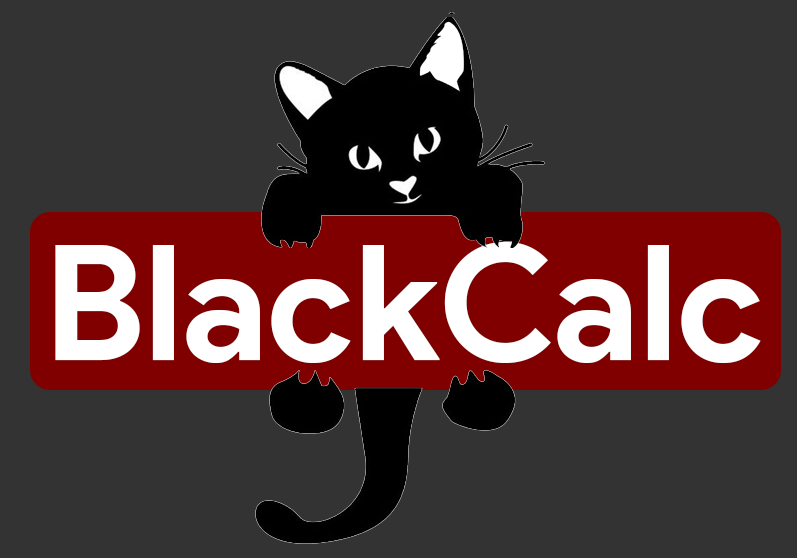
<style>
.page{position:relative;width:797px;height:558px;background:#333333}
.page>*{position:absolute;margin:0}
.t1{font:160px "ProductSans-Bold";color:#ffffff}
</style>
<div class="page">
<p class="t1" style="left:55px;top:242px;width:706px;height:121px">BlackCalc</p>
</div>
